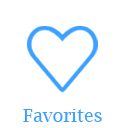
<style>
.page{position:relative;width:128px;height:128px;background:#ffffff}
.page>*{position:absolute;margin:0}
.t1{font:18px "LucidaBright";color:#3ca0ff}
</style>
<div class="page">
<p class="t1" style="left:23px;top:109px;width:79px;height:13px">Favorites</p>
</div>
